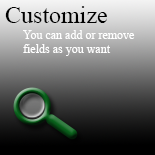
<style>
.page{position:relative;width:155px;height:155px}
.page>*{position:absolute;margin:0}
.t1{font:24px "TimesNewRomanPSMT";color:#000000}
.t2{font:12px "TimesNewRomanPSMT";color:#ffffff}
</style>
<div class="page">
<p class="t1" style="left:5px;top:6px;width:102px;height:17px">Customize</p>
<p class="t2" style="left:23px;top:30px;width:112px;height:26px">You can add or remove<br>fields as you want</p>
</div>
